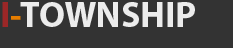
<style>
.page{position:relative;width:233px;height:48px;background:#333333}
.page>*{position:absolute;margin:0}
.t1{font:36px "MyriadPro-Bold";color:#ececec}
.t2{font:36px "MyriadPro-Bold";color:#9b2727}
.t3{font:36px "MyriadPro-Bold";color:#e67d00}
</style>
<div class="page">
<p class="t1" style="left:2px;top:2px;width:193px;height:25px"><span class="t2">I</span><span class="t3">-</span>TOWNSHIP</p>
</div>
